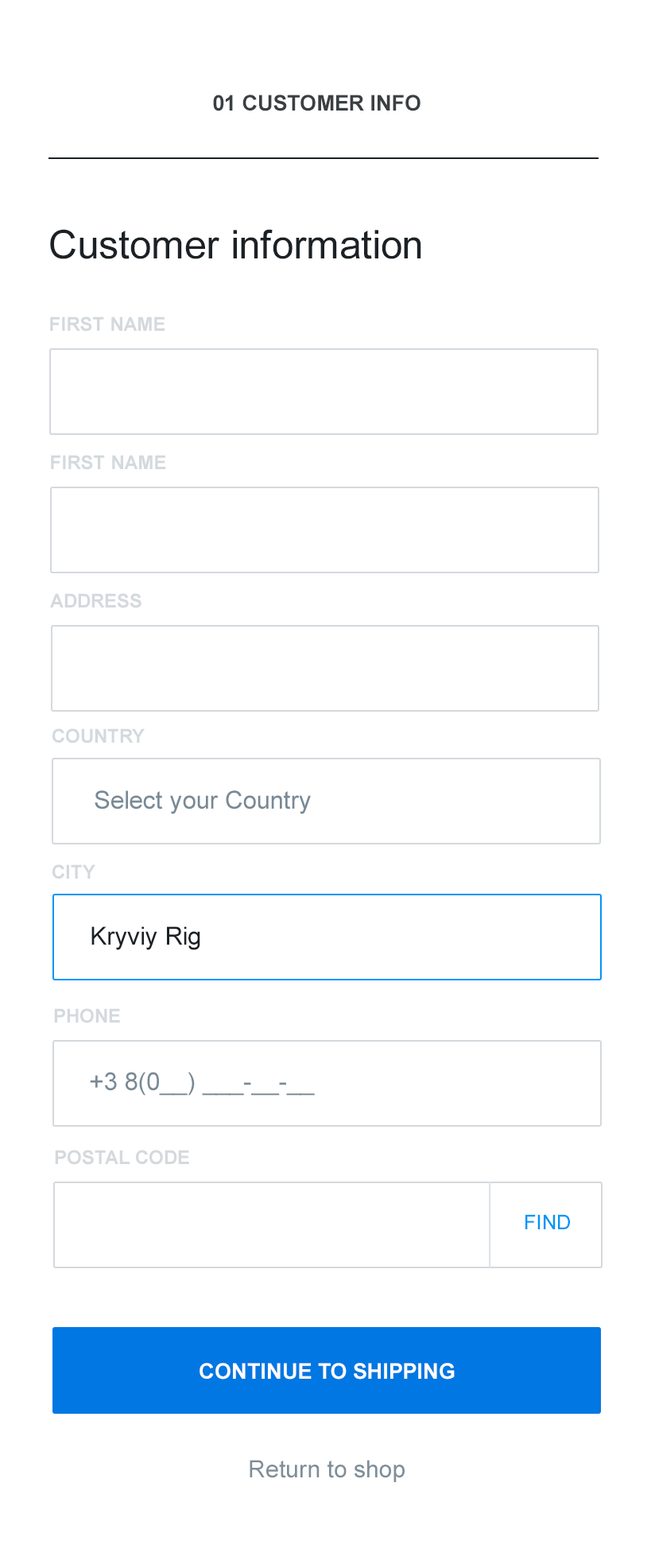
<style>
.page{position:relative;width:651px;height:1568px;background:#ffffff}
.page>*{position:absolute;margin:0}
.t1{font:21.5px "Arial-BoldMT";color:#3a3f42;text-transform:uppercase}
.t2{font:39.6px "ArialMT";color:#1b2125}
.t3{font:19.1px "Arial-BoldMT";color:#d4d9dd;text-transform:uppercase}
.t4{font:25px "ArialMT";color:#788995}
.t5{font:25px "ArialMT";color:#1b2125}
.t6{font:20px "ArialMT";color:#0095f8}
.t7{font:21.5px "Arial-BoldMT";color:#ffffff;text-transform:uppercase}
.t8{font:23.9px "ArialMT";color:#7e8e99}
</style>
<div class="page">
<p class="t1" style="left:213px;top:95px;width:208px;height:16px">01 Customer info</p>
<p class="t2" style="left:50px;top:229px;width:371px;height:30px">Customer information</p>
<p class="t3" style="left:50px;top:316px;width:115px;height:16px">First name</p>
<p class="t3" style="left:51px;top:455px;width:115px;height:15px">First name</p>
<p class="t3" style="left:50px;top:593px;width:92px;height:15px">ADdress</p>
<p class="t3" style="left:52px;top:728px;width:93px;height:15px">Country</p>
<p class="t4" style="left:95px;top:790px;width:216px;height:24px">Select your Country</p>
<p class="t3" style="left:52px;top:864px;width:43px;height:15px">City</p>
<p class="t5" style="left:91px;top:926px;width:109px;height:24px">Kryviy Rig</p>
<p class="t3" style="left:54px;top:1008px;width:66px;height:15px">Phone</p>
<p class="t4" style="left:90px;top:1072px;width:225px;height:24px">+3 8(0__) ___-__-__</p>
<p class="t3" style="left:55px;top:1150px;width:134px;height:15px">Postal code</p>
<p class="t6" style="left:526px;top:1214px;width:44px;height:15px">FIND</p>
<p class="t7" style="left:200px;top:1363px;width:255px;height:17px">Continue to shipping</p>
<p class="t8" style="left:250px;top:1460px;width:155px;height:22px">Return to shop</p>
</div>
